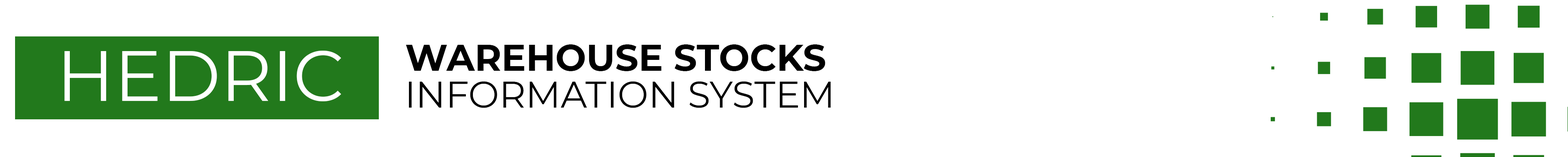
<style>
.page{position:relative;width:1568px;height:157px;background:#ffffff}
.page>*{position:absolute;margin:0}
.t1{font:71px "Montserrat-Regular";color:#ffffff}
.t2{font:36.6px "Montserrat-Bold";color:#000000}
.t3{font:36.6px "Montserrat-Regular";color:#000000}
</style>
<div class="page">
<p class="t1" style="left:64px;top:51px;width:277px;height:50px">HEDRIC</p>
<p class="t2" style="left:406px;top:44px;width:419px;height:27px">WAREHOUSE STOCKS</p>
<p class="t3" style="left:409px;top:81px;width:422px;height:27px">INFORMATION SYSTEM</p>
</div>
